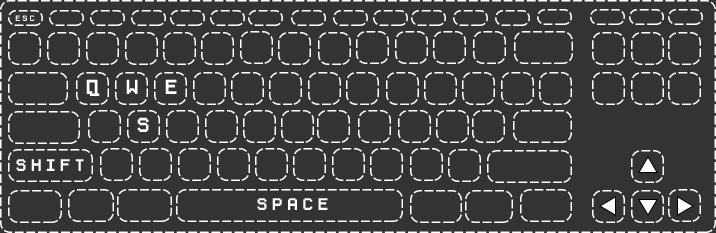
<style>
.page{position:relative;width:716px;height:233px;background:#333333}
.page>*{position:absolute;margin:0}
.t1{font:7px "PixelSplitter-Bold";color:#ffffff}
.t2{font:18px "PixelSplitter-Bold";color:#ffffff}
.t3{font:15px "PixelSplitter-Bold";color:#ffffff}
</style>
<div class="page">
<p class="t1" style="left:15px;top:15px;width:20px;height:6px">E S C</p>
<p class="t2" style="left:86px;top:79px;width:14px;height:17px">Q</p>
<p class="t2" style="left:126px;top:79px;width:12px;height:15px">W</p>
<p class="t2" style="left:165px;top:79px;width:12px;height:15px">E</p>
<p class="t2" style="left:137px;top:117px;width:12px;height:15px">S</p>
<p class="t3" style="left:16px;top:159px;width:68px;height:12px">S H I F T</p>
<p class="t3" style="left:257px;top:198px;width:71px;height:12px">S P A C E</p>
</div>
